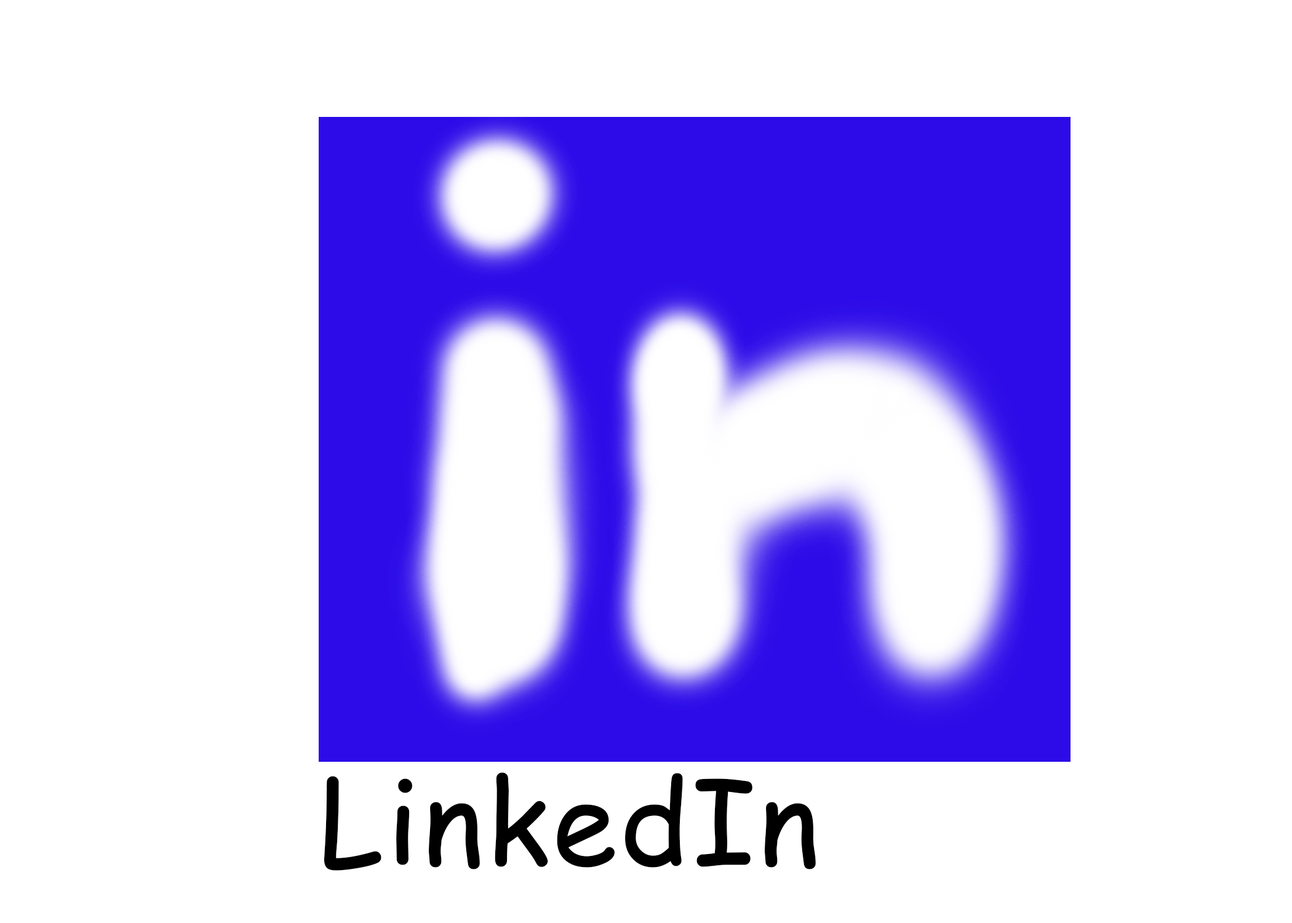
<style>
.page{position:relative;width:1292px;height:923px;background:#ffffff}
.page>*{position:absolute;margin:0}
.t1{font:116.7px "ComicSansMS";color:#000000;font-weight:bold}
</style>
<div class="page">
<p class="t1" style="left:324px;top:772px;width:492px;height:99px">LinkedIn</p>
</div>
